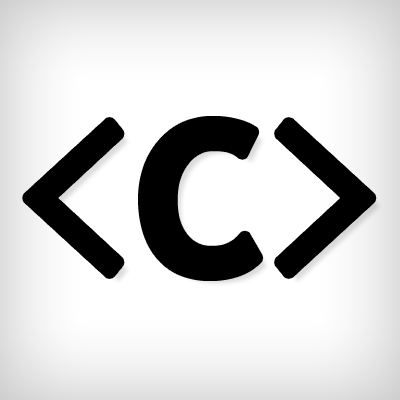
<style>
.page{position:relative;width:400px;height:400px;background:#ffffff}
.page>*{position:absolute;margin:0}
.t1{font:208.3px "LetterGothicStd-Bold";color:#000000}
.t2{font:208.3px "TrebuchetMS-Bold";color:#000000}
</style>
<div class="page">
<p class="t1" style="left:28px;top:122px;width:343px;height:153px">&lt;<span class="t2">C</span>&gt;</p>
</div>
